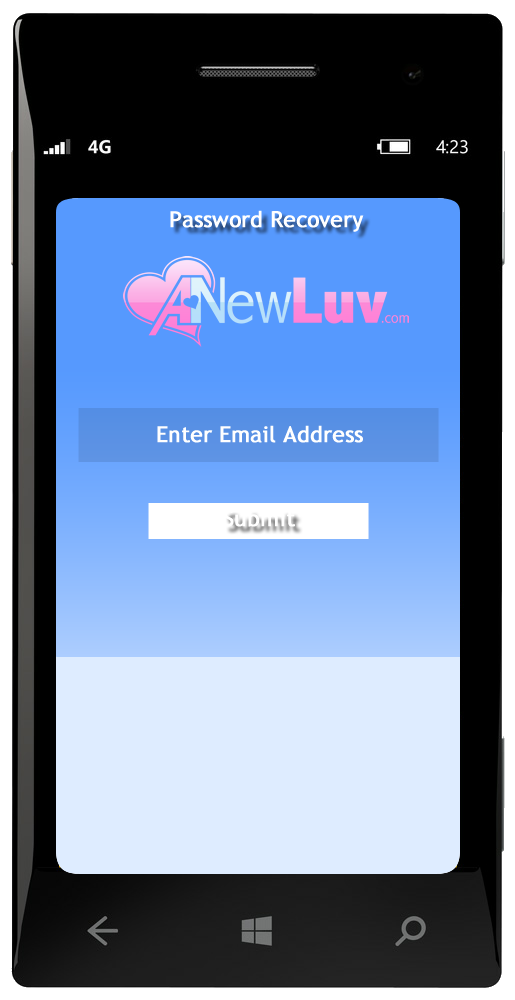
<style>
.page{position:relative;width:515px;height:1000px;background:#000000}
.page>*{position:absolute;margin:0}
.t1{font:22px "TrebuchetMS";color:#ffffff;font-weight:bold}
</style>
<div class="page">
<p class="t1" style="left:170px;top:210px;width:194px;height:22px">Password Recovery</p>
<p class="t1" style="left:157px;top:425px;width:206px;height:18px">Enter Email Address</p>
<p class="t1" style="left:223px;top:509px;width:72px;height:18px">Submit</p>
</div>
